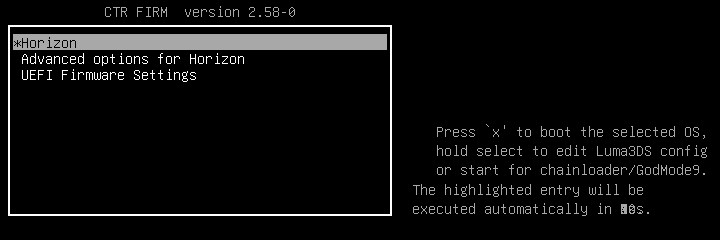
<style>
.page{position:relative;width:720px;height:240px;background:#000000}
.page>*{position:absolute;margin:0}
.t1{font:16px "Unifont";color:#a8a8a8}
.t2{font:16px "Unifont";color:#000000}
.t3{font:16px "Unifont";color:#fefefe}
</style>
<div class="page">
<p class="t1" style="left:105px;top:6px;width:190px;height:11px">CTR FIRM  version 2.58-0</p>
<p class="t2" style="left:14px;top:37px;width:62px;height:11px">*Horizon</p>
<p class="t3" style="left:22px;top:53px;width:222px;height:13px">Advanced options for Horizon</p>
<p class="t3" style="left:22px;top:69px;width:174px;height:13px">UEFI Firmware Settings</p>
<p class="t1" style="left:413px;top:124px;width:294px;height:92px">Press `x' to boot the selected OS,<br>   hold select to edit Luma3DS config<br>   or start for chainloader/GodMode9.<br>The highlighted entry will be<br>executed automatically in 10s.</p>
<p class="t1" style="left:413px;top:124px;width:294px;height:92px">Press `x' to boot the selected OS,<br>   hold select to edit Luma3DS config<br>   or start for chainloader/GodMode9.<br>The highlighted entry will be<br>executed automatically in 9s.</p>
<p class="t1" style="left:413px;top:124px;width:294px;height:92px">Press `x' to boot the selected OS,<br>   hold select to edit Luma3DS config<br>   or start for chainloader/GodMode9.<br>The highlighted entry will be<br>executed automatically in 8s.</p>
<p class="t1" style="left:413px;top:124px;width:294px;height:92px">Press `x' to boot the selected OS,<br>   hold select to edit Luma3DS config<br>   or start for chainloader/GodMode9.<br>The highlighted entry will be<br>executed automatically in 7s.</p>
<p class="t1" style="left:413px;top:124px;width:294px;height:92px">Press `x' to boot the selected OS,<br>   hold select to edit Luma3DS config<br>   or start for chainloader/GodMode9.<br>The highlighted entry will be<br>executed automatically in 6s.</p>
<p class="t1" style="left:413px;top:124px;width:294px;height:92px">Press `x' to boot the selected OS,<br>   hold select to edit Luma3DS config<br>   or start for chainloader/GodMode9.<br>The highlighted entry will be<br>executed automatically in 5s.</p>
<p class="t1" style="left:413px;top:124px;width:294px;height:92px">Press `x' to boot the selected OS,<br>   hold select to edit Luma3DS config<br>   or start for chainloader/GodMode9.<br>The highlighted entry will be<br>executed automatically in 4s.</p>
<p class="t1" style="left:413px;top:124px;width:294px;height:92px">Press `x' to boot the selected OS,<br>   hold select to edit Luma3DS config<br>   or start for chainloader/GodMode9.<br>The highlighted entry will be<br>executed automatically in 3s.</p>
<p class="t1" style="left:413px;top:124px;width:294px;height:92px">Press `x' to boot the selected OS,<br>   hold select to edit Luma3DS config<br>   or start for chainloader/GodMode9.<br>The highlighted entry will be<br>executed automatically in 2s.</p>
<p class="t1" style="left:413px;top:124px;width:294px;height:92px">Press `x' to boot the selected OS,<br>   hold select to edit Luma3DS config<br>   or start for chainloader/GodMode9.<br>The highlighted entry will be<br>executed automatically in 1s.</p>
<p class="t1" style="left:413px;top:124px;width:294px;height:92px">Press `x' to boot the selected OS,<br>   hold select to edit Luma3DS config<br>   or start for chainloader/GodMode9.<br>The highlighted entry will be<br>executed automatically in 0s.</p>
</div>
